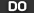
<style>
.page{position:relative;width:34px;height:13px;background:#333333}
.page>*{position:absolute;margin:0}
.t1{font:13.9px "K2D-ExtraBold";color:#ffffff}
</style>
<div class="page">
<p class="t1" style="left:8px;top:1px;width:19px;height:11px">DO</p>
</div>
